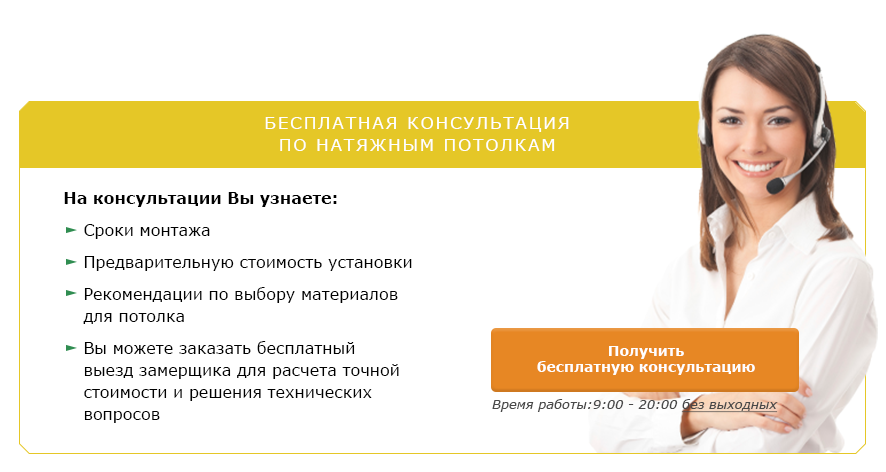
<style>
.page{position:relative;width:886px;height:472px;background:#ffffff}
.page>*{position:absolute;margin:0}
.t1{font:17px/22px "Verdana";letter-spacing:0.1em;color:#ffffff;text-transform:uppercase}
.t2{font:16px/22px "Verdana";color:#000000}
.t3{font:16px/22px "Verdana-Bold";color:#000000}
.t4{font:14px/16px "Verdana-Bold";color:#ffffff}
.t5{font:13px "Verdana-Italic";color:#494949}
.t6{font:13px "Verdana-Italic";color:#494949;text-decoration:underline}
</style>
<div class="page">
<p class="t1" style="left:265px;top:117px;width:304px;height:34px;text-align:center">бесплатная консультация<br>по натяжным потолкам</p>
<p class="t2" style="left:64px;top:192px;width:348px;height:231px"><span class="t3">На консультации Вы узнаете:<br></span>Сроки монтажа<br>Предварительную стоимость установки<br>Рекомендации по выбору материалов для потолка<br>Вы можете заказать бесплатный<br>выезд замерщика для расчета точной стоимости и решения технических вопросов</p>
<p class="t4" style="left:537px;top:346px;width:218px;height:29px;text-align:center">Получить<br>бесплатную консультацию</p>
<p class="t5" style="left:492px;top:399px;width:286px;height:14px">Время работы:9:00 - 20:00 <span class="t6">без выходных</span></p>
</div>
